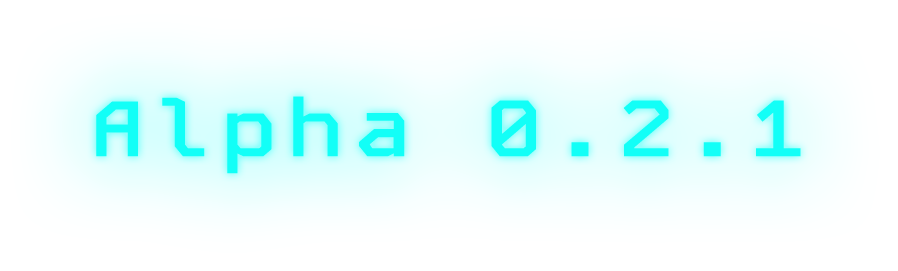
<style>
.page{position:relative;width:898px;height:271px;background:#ffffff}
.page>*{position:absolute;margin:0}
.t1{font:78px "KodeMono-SemiBold";letter-spacing:0.1em;color:#12fff7;scale:1.21 1}
</style>
<div class="page">
<p class="t1" style="left:96px;top:96px;width:705px;height:78px">Alpha 0.2.1</p>
<p class="t1" style="left:96px;top:96px;width:705px;height:78px">Alpha 0.2.1</p>
</div>
